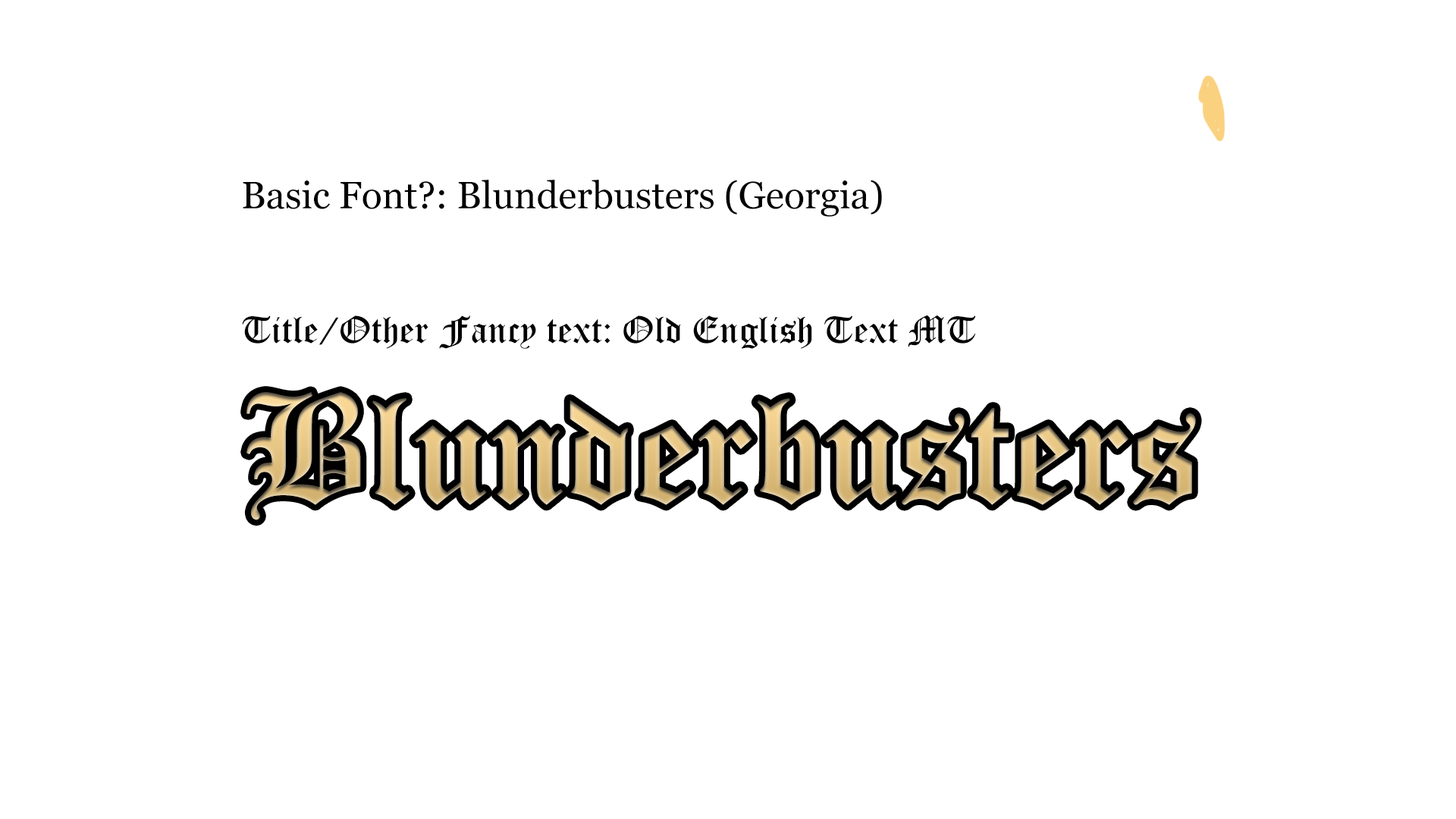
<style>
.page{position:relative;width:1456px;height:819px;background:#ffffff}
.page>*{position:absolute;margin:0}
.t1{font:37.9px "Georgia";color:#010101}
.t2{font:37.9px "OldEnglishTextMT";color:#010101}
</style>
<div class="page">
<p class="t1" style="left:243px;top:180px;width:639px;height:37px">Basic Font?: Blunderbusters (Georgia)</p>
<p class="t2" style="left:242px;top:315px;width:734px;height:34px">Title/Other Fancy text: Old English Text MT</p>
</div>
